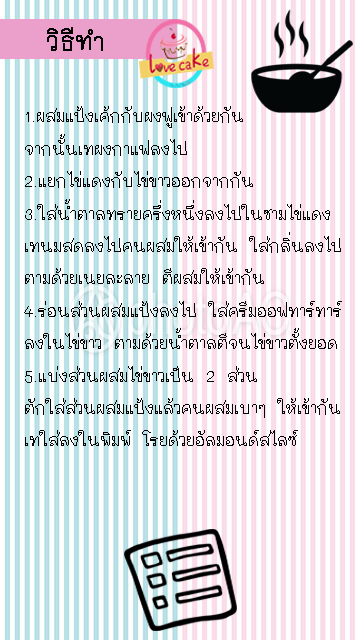
<style>
.page{position:relative;width:360px;height:640px}
.page>*{position:absolute;margin:0}
.t1{font:40px "THMaliGrade6";color:#040404;font-weight:bold}
.t2{font:27px "THMaliGrade6";color:#060606}
</style>
<div class="page">
<p class="t1" style="left:47px;top:27px;width:56px;height:24px">วิธีทำ</p>
<p class="t2" style="left:24px;top:106px;width:318px;height:340px;text-align:right">1.ผสมแป้งเค้กกับผงฟูเข้าด้วยกัน<br>จากนั้นเทผงกาแฟลงไป<br>2.แยกไข่แดงกับไข่ขาวออกจากกัน <br>3.ใส่น้ำตาลทรายครึ่งหนึ่งลงไปในชามไข่แดง<br>เทนมสดลงไปคนผสมให้เข้ากัน ใส่กลิ่นลงไป<br>ตามด้วยเนยละลาย ตีผสมให้เข้ากัน<br>4.ร่อนส่วนผสมแป้งลงไป ใส่ครีมออฟทาร์ทาร์<br>ลงในไข่ขาว ตามด้วยน้ำตาลตีจนไข่ขาวตั้งยอด<br>5.แบ่งส่วนผสมไข่ขาวเป็น 2 ส่วน <br>ตักใส่ส่วนผสมแป้งแล้วคนผสมเบาๆ ให้เข้ากัน<br>เทใส่ลงในพิมพ์ โรยด้วยอัลมอนด์สไลซ์</p>
</div>
